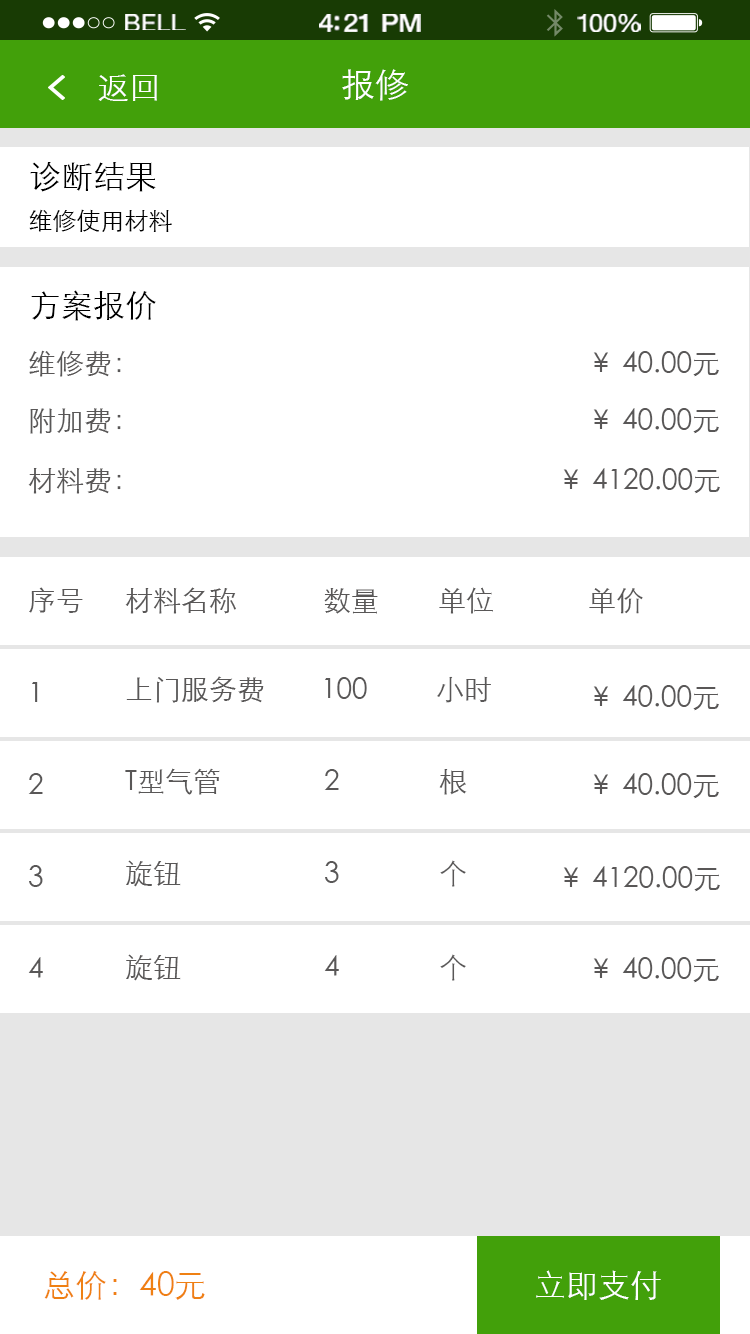
<style>
.page{position:relative;width:750px;height:1334px;background:#ffffff}
.page>*{position:absolute;margin:0}
.t1{font:23.3px "HelveticaNeue";letter-spacing:0.02em;color:#ffffff;scale:1.06 1}
.t2{font:25.3px "HelveticaNeue-Medium";letter-spacing:-0.02em;color:#ffffff;scale:1.06 1}
.t3{font:24.3px "HelveticaNeue";letter-spacing:-0.02em;color:#ffffff;scale:1.06 1}
.t4{font:32px "STXihei";color:#ffffff}
.t5{font:34px "STXihei";color:#ffffff}
.t6{font:32px "STXihei";color:#000000}
.t7{font:24px "STXihei";color:#000000}
.t8{font:28px "STXihei";color:#595757}
.t9{font:32px "STXihei";color:#ef8013}
</style>
<div class="page">
<p class="t1" style="left:125px;top:14px;width:61px;height:16px">BELL</p>
<p class="t2" style="left:319px;top:14px;width:102px;height:18px">4:21 PM</p>
<p class="t3" style="left:577px;top:14px;width:64px;height:18px">100%</p>
<p class="t4" style="left:98px;top:74px;width:59px;height:27px">返回</p>
<p class="t5" style="left:342px;top:69px;width:66px;height:32px">报修</p>
<p class="t6" style="left:30px;top:162px;width:126px;height:30px">诊断结果</p>
<p class="t7" style="left:29px;top:209px;width:143px;height:23px">维修使用材料</p>
<p class="t6" style="left:31px;top:290px;width:125px;height:31px">方案报价</p>
<p class="t8" style="left:29px;top:350px;width:92px;height:27px">维修费：</p>
<p class="t8" style="left:593px;top:351px;width:126px;height:26px">￥ 40.00元</p>
<p class="t8" style="left:30px;top:408px;width:91px;height:26px">附加费：</p>
<p class="t8" style="left:593px;top:408px;width:126px;height:26px">￥ 40.00元</p>
<p class="t8" style="left:28px;top:468px;width:93px;height:26px">材料费：</p>
<p class="t8" style="left:563px;top:468px;width:157px;height:26px">￥ 4120.00元</p>
<p class="t8" style="left:29px;top:587px;width:54px;height:26px">序号</p>
<p class="t8" style="left:125px;top:587px;width:111px;height:27px">材料名称</p>
<p class="t8" style="left:324px;top:588px;width:54px;height:26px">数量</p>
<p class="t8" style="left:439px;top:587px;width:54px;height:27px">单位</p>
<p class="t8" style="left:589px;top:588px;width:54px;height:26px">单价</p>
<p class="t8" style="left:126px;top:676px;width:138px;height:27px">上门服务费</p>
<p class="t8" style="left:325px;top:677px;width:42px;height:22px">100</p>
<p class="t8" style="left:437px;top:676px;width:54px;height:27px">小时</p>
<p class="t8" style="left:32px;top:682px;width:6px;height:20px">1</p>
<p class="t8" style="left:593px;top:685px;width:126px;height:26px">￥ 40.00元</p>
<p class="t8" style="left:28px;top:773px;width:15px;height:21px">2</p>
<p class="t8" style="left:125px;top:768px;width:95px;height:27px">T型气管</p>
<p class="t8" style="left:324px;top:769px;width:15px;height:21px">2</p>
<p class="t8" style="left:439px;top:769px;width:28px;height:26px">根</p>
<p class="t8" style="left:593px;top:773px;width:126px;height:26px">￥ 40.00元</p>
<p class="t8" style="left:29px;top:865px;width:14px;height:22px">3</p>
<p class="t8" style="left:126px;top:860px;width:55px;height:27px">旋钮</p>
<p class="t8" style="left:325px;top:861px;width:14px;height:22px">3</p>
<p class="t8" style="left:440px;top:860px;width:26px;height:27px">个</p>
<p class="t8" style="left:563px;top:866px;width:157px;height:26px">￥ 4120.00元</p>
<p class="t8" style="left:28px;top:957px;width:15px;height:21px">4</p>
<p class="t8" style="left:126px;top:954px;width:55px;height:27px">旋钮</p>
<p class="t8" style="left:324px;top:955px;width:15px;height:21px">4</p>
<p class="t8" style="left:440px;top:954px;width:26px;height:27px">个</p>
<p class="t8" style="left:593px;top:957px;width:126px;height:26px">￥ 40.00元</p>
<p class="t9" style="left:44px;top:1271px;width:161px;height:29px">总价：40元</p>
<p class="t4" style="left:536px;top:1270px;width:125px;height:30px">立即支付</p>
</div>
